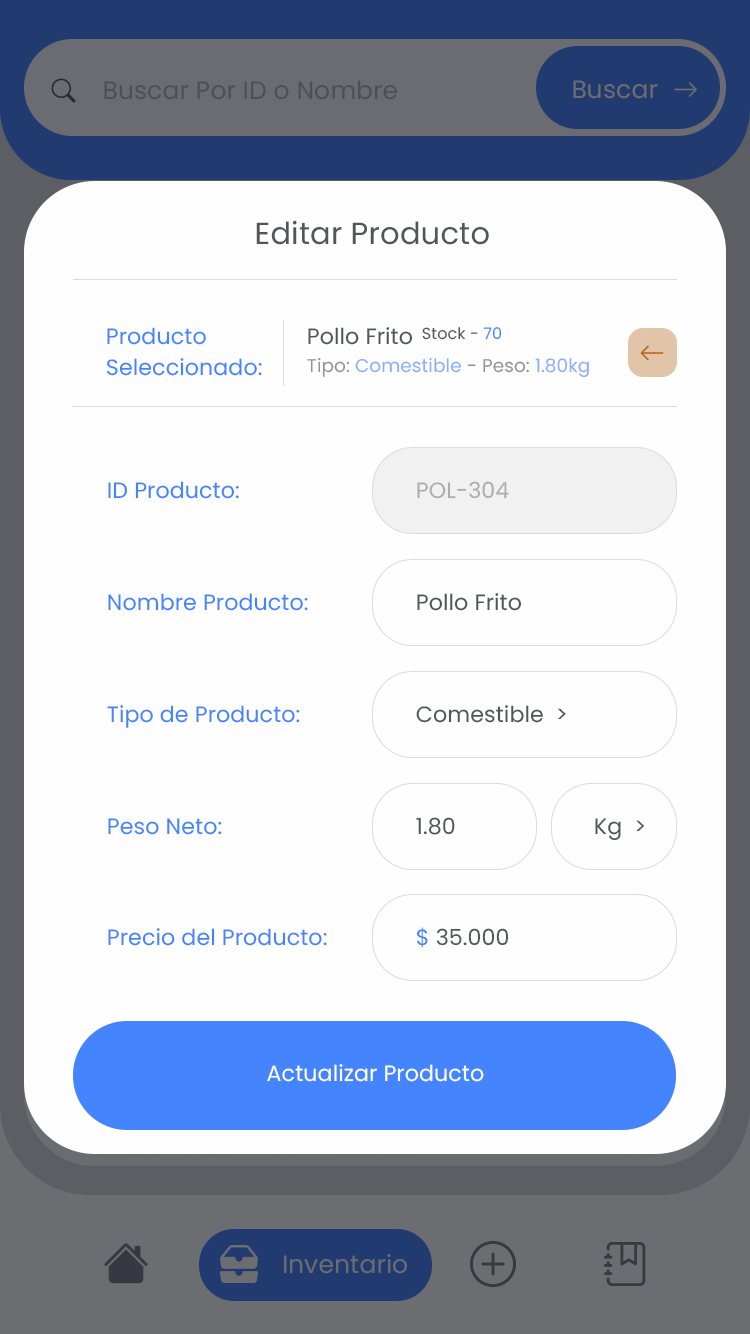
<style>
.page{position:relative;width:750px;height:1334px;background:#fefefe}
.page>*{position:absolute;margin:0}
.t1{font:30.6px "Poppins-Regular";letter-spacing:0.005em;color:#52565b}
.t2{font:22.1px "Poppins-Regular";letter-spacing:0.005em;color:#4484ff}
.t3{font:22.1px "Poppins-Regular";letter-spacing:0.005em;color:#52565b}
.t4{font:22.1px "Poppins-Regular";letter-spacing:0.005em;color:#52565b;text-transform:uppercase}
.t5{font:16px "Poppins-Regular";letter-spacing:0.005em;color:#52565b}
.t6{font:16px "Poppins-Regular";letter-spacing:0.005em;color:#52565b;text-transform:uppercase}
.t7{font:16px "Poppins-Regular";letter-spacing:0.005em;color:#4484ff}
.t8{font:18.4px "Poppins-Regular";letter-spacing:0.005em}
.t9{font:22.1px "Poppins-Regular";letter-spacing:0.005em;color:#abadae}
.t10{font:22.1px "Poppins-Regular";letter-spacing:0.005em;color:#ffffff}
.t11{font:25px "Poppins-Regular";letter-spacing:0.005em;color:#6b6c71}
</style>
<div class="page">
<p class="t1" style="left:256px;top:220px;width:233px;height:25px">Editar Producto</p>
<p class="t2" style="left:107px;top:327px;width:99px;height:18px">Producto</p>
<p class="t3" style="left:308px;top:327px;width:105px;height:18px"><span class="t4">p</span>ollo Frito</p>
<p class="t5" style="left:422px;top:327px;width:80px;height:13px"><span class="t6">S</span>tock - <span class="t7">70</span></p>
<p class="t2" style="left:107px;top:358px;width:155px;height:18px">Seleccionado:</p>
<p class="t8" style="left:307px;top:357px;width:282px;height:21px">Tipo: Comestible - Peso: 1.80kg</p>
<p class="t2" style="left:108px;top:481px;width:131px;height:18px">ID Producto:</p>
<p class="t9" style="left:417px;top:481px;width:92px;height:18px">POL-304</p>
<p class="t2" style="left:108px;top:593px;width:200px;height:18px">Nombre Producto:</p>
<p class="t3" style="left:417px;top:593px;width:105px;height:18px">Pollo Frito</p>
<p class="t2" style="left:107px;top:705px;width:193px;height:23px">Tipo de Producto:</p>
<p class="t3" style="left:416px;top:705px;width:150px;height:18px">Comestible  &gt;</p>
<p class="t2" style="left:108px;top:818px;width:114px;height:17px">Peso Neto:</p>
<p class="t3" style="left:416px;top:817px;width:39px;height:18px">1.80</p>
<p class="t3" style="left:595px;top:818px;width:50px;height:23px">Kg  &gt;</p>
<p class="t2" style="left:108px;top:928px;width:219px;height:18px">Precio del Producto:</p>
<p class="t3" style="left:416px;top:927px;width:93px;height:20px"><span class="t2">$</span> 35.000</p>
<p class="t10" style="left:267px;top:1064px;width:217px;height:18px">Actualizar Producto</p>
<p class="t11" style="left:284px;top:1254px;width:123px;height:20px">Inventario</p>
</div>
